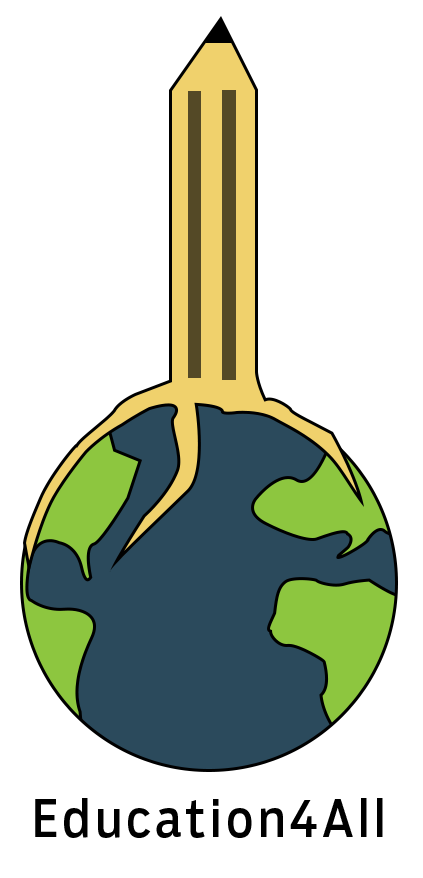
<style>
.page{position:relative;width:423px;height:878px;background:#ffffff}
.page>*{position:absolute;margin:0}
.t1{font:51px "BoomerCond-Regular";letter-spacing:0.08em;color:#000000}
</style>
<div class="page">
<p class="t1" style="left:35px;top:798px;width:348px;height:40px">Education4All</p>
</div>
